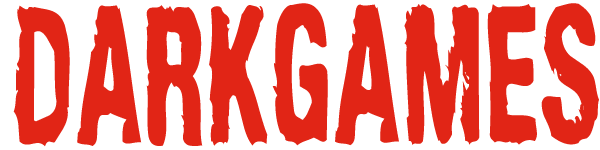
<style>
.page{position:relative;width:600px;height:150px;background:#e12516}
.page>*{position:absolute;margin:0}
.t1{font:175.3px "ArmyChalk";color:#e12516;scale:0.59 1}
</style>
<div class="page">
<p class="t1" style="left:13px;top:3px;width:586px;height:144px">DARKGAMES</p>
</div>
